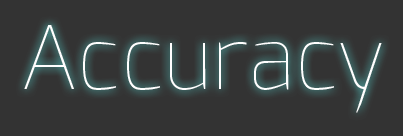
<style>
.page{position:relative;width:403px;height:136px;background:#333333}
.page>*{position:absolute;margin:0}
.t1{font:87.2px "Exo-Thin";color:#ffffff}
</style>
<div class="page">
<p class="t1" style="left:24px;top:25px;width:358px;height:88px">Accuracy</p>
</div>
